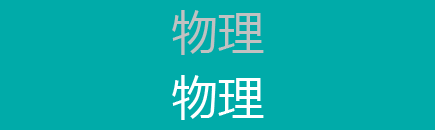
<style>
.page{position:relative;width:435px;height:130px;background:#00aba9}
.page>*{position:absolute;margin:0}
.t1{font:45.8px "MicrosoftYaHei";color:#c1c1c1}
.t2{font:45.8px "MicrosoftYaHei";color:#ffffff}
</style>
<div class="page">
<p class="t1" style="left:172px;top:10px;width:92px;height:45px">物理</p>
<p class="t2" style="left:172px;top:75px;width:92px;height:45px">物理</p>
</div>
